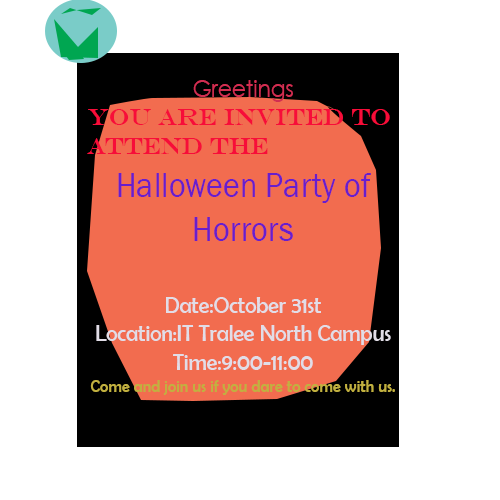
<style>
.page{position:relative;width:500px;height:500px;background:#ffffff}
.page>*{position:absolute;margin:0}
.t1{font:24px "BerlinSansFB-Reg";color:#e1dde7;scale:0.9 1}
.t2{font:24px "CenturyGothic";color:#d22e51;scale:0.9 1}
.t3{font:24px "EngraversMT";color:#f70d39;scale:0.9 1}
.t4{font:36px "FranklinGothic-Book";color:#681ecd;scale:0.9 1}
.t5{font:18px "BerlinSansFB-Reg";color:#c1b040;scale:0.9 1}
</style>
<div class="page">
<p class="t1" style="left:87px;top:80px;width:308px;height:315px;text-align:center"><span class="t2">Greetings<br></span><span class="t3">You are invited to attend the<br></span><span class="t4">Halloween Party of Horrors<br><br></span>Date:October 31st<br>Location:IT Tralee North Campus<br>Time:9:00-11:00<br><span class="t5">Come and join us if you dare to come with us.</span></p>
</div>
